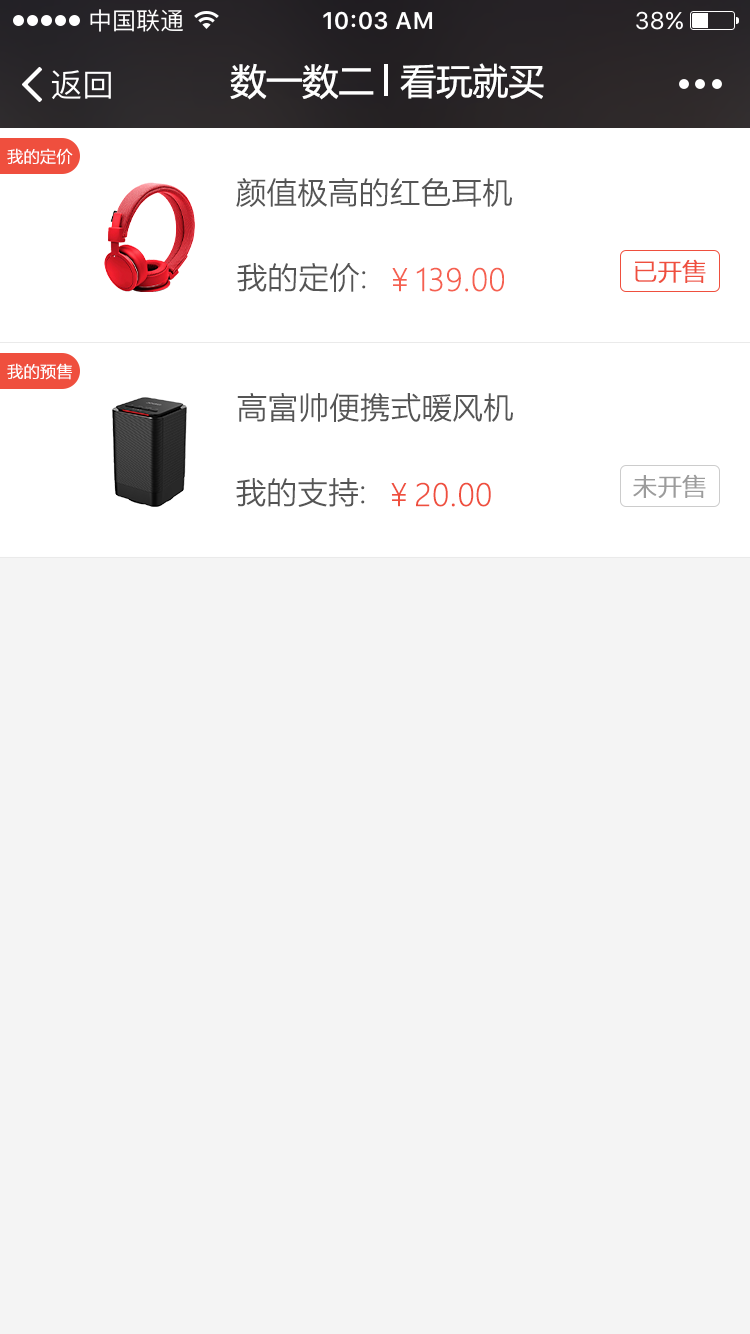
<style>
.page{position:relative;width:750px;height:1334px;background:#f4f4f4}
.page>*{position:absolute;margin:0}
.t1{font:36px "MicrosoftYaHei";color:#ffffff}
.t2{font:16px "MicrosoftYaHeiLight";color:#ffffff;font-weight:bold}
.t3{font:30px "MicrosoftYaHeiLight";color:#555555;font-weight:bold}
.t4{font:30px "MicrosoftYaHeiLight";color:#f56050;font-weight:bold}
.t5{font:24px "MicrosoftYaHeiLight";color:#ef4f3e;font-weight:bold}
.t6{font:30px "MicrosoftYaHeiLight";color:#ef4f3e;font-weight:bold}
.t7{font:24px "MicrosoftYaHeiLight";color:#9c9c9c;font-weight:bold}
</style>
<div class="page">
<p class="t1" style="left:230px;top:63px;width:144px;height:37px">数一数二</p>
<p class="t1" style="left:400px;top:63px;width:144px;height:36px">看玩就买</p>
<p class="t2" style="left:7px;top:148px;width:66px;height:17px">我的定价</p>
<p class="t3" style="left:236px;top:178px;width:276px;height:29px">颜值极高的红色耳机</p>
<p class="t3" style="left:237px;top:263px;width:129px;height:29px">我的定价:</p>
<p class="t4" style="left:392px;top:267px;width:112px;height:25px">￥139.00</p>
<p class="t5" style="left:635px;top:259px;width:71px;height:24px">已开售</p>
<p class="t2" style="left:7px;top:363px;width:65px;height:17px">我的预售</p>
<p class="t3" style="left:237px;top:393px;width:276px;height:29px">高富帅便携式暖风机</p>
<p class="t3" style="left:236px;top:478px;width:129px;height:29px">我的支持:</p>
<p class="t6" style="left:391px;top:482px;width:100px;height:25px">￥20.00</p>
<p class="t7" style="left:633px;top:474px;width:73px;height:24px">未开售</p>
</div>
